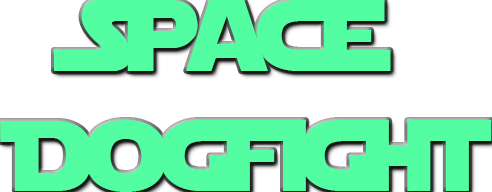
<style>
.page{position:relative;width:492px;height:192px;background:#53fea3}
.page>*{position:absolute;margin:0}
.t1{font:100px "StarJedi";letter-spacing:-0.08em;color:#53fea3}
</style>
<div class="page">
<p class="t1" style="left:0px;top:0px;width:492px;height:192px;text-align:center">Space <br>DogFight</p>
</div>
